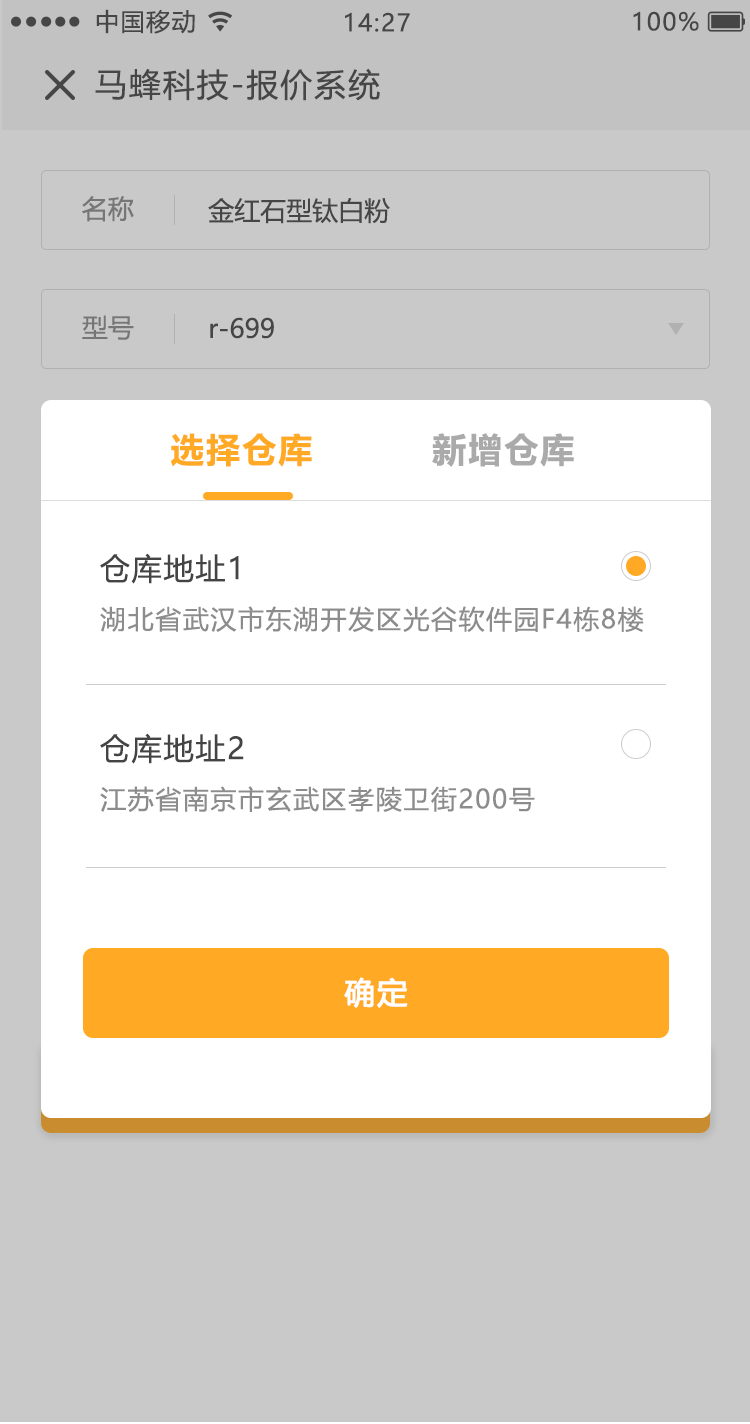
<style>
.page{position:relative;width:750px;height:1424px;background:#c9c9c9}
.page>*{position:absolute;margin:0}
.t1{font:24px "MicrosoftYaHeiUI";letter-spacing:0.06em;color:#444444}
.t2{font:32px "MicrosoftYaHeiUI";letter-spacing:0.06em;color:#444444}
.t3{font:26px "MicrosoftYaHeiUI";color:#888888}
.t4{font:26px "MicrosoftYaHeiUI";color:#444444}
.t5{font:34px "MicrosoftYaHeiUI-Bold";letter-spacing:0.06em;color:#ffa924}
.t6{font:34px "MicrosoftYaHeiUI-Bold";letter-spacing:0.06em;color:#aaaaaa}
.t7{font:30px "MicrosoftYaHeiUI";letter-spacing:0.06em;color:#444444}
.t8{font:26px "MicrosoftYaHeiUI";letter-spacing:0.06em;color:#8c8c8c}
.t9{font:30px "MicrosoftYaHeiUI";letter-spacing:0.06em;color:#ffffff;font-weight:bold}
</style>
<div class="page">
<p class="t1" style="left:96px;top:9px;width:99px;height:25px">中国移动</p>
<p class="t1" style="left:345px;top:12px;width:65px;height:20px">14:27</p>
<p class="t1" style="left:633px;top:11px;width:66px;height:20px">100%</p>
<p class="t2" style="left:95px;top:68px;width:285px;height:33px">马蜂科技-报价系统</p>
<p class="t3" style="left:82px;top:196px;width:52px;height:26px">名称</p>
<p class="t4" style="left:208px;top:198px;width:182px;height:26px">金红石型钛白粉</p>
<p class="t3" style="left:82px;top:315px;width:52px;height:25px">型号</p>
<p class="t4" style="left:210px;top:317px;width:64px;height:22px">r-699</p>
<p class="t5" style="left:171px;top:433px;width:141px;height:34px">选择仓库</p>
<p class="t6" style="left:432px;top:433px;width:142px;height:34px">新增仓库</p>
<p class="t7" style="left:100px;top:553px;width:139px;height:31px">仓库地址1</p>
<p class="t8" style="left:100px;top:606px;width:544px;height:26px">湖北省武汉市东湖开发区光谷软件园F4栋8楼</p>
<p class="t7" style="left:100px;top:733px;width:144px;height:31px">仓库地址2</p>
<p class="t8" style="left:100px;top:786px;width:435px;height:26px">江苏省南京市玄武区孝陵卫街200号</p>
<p class="t9" style="left:344px;top:977px;width:64px;height:31px">确定</p>
</div>
